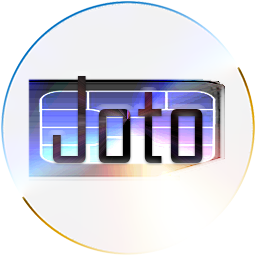
<style>
.page{position:relative;width:256px;height:256px;background:#ffffff}
.page>*{position:absolute;margin:0}
.t1{font:114px "AgencyFB-Reg"}
</style>
<div class="page">
<p class="t1" style="left:53px;top:76px;width:150px;height:87px">Joto</p>
</div>
